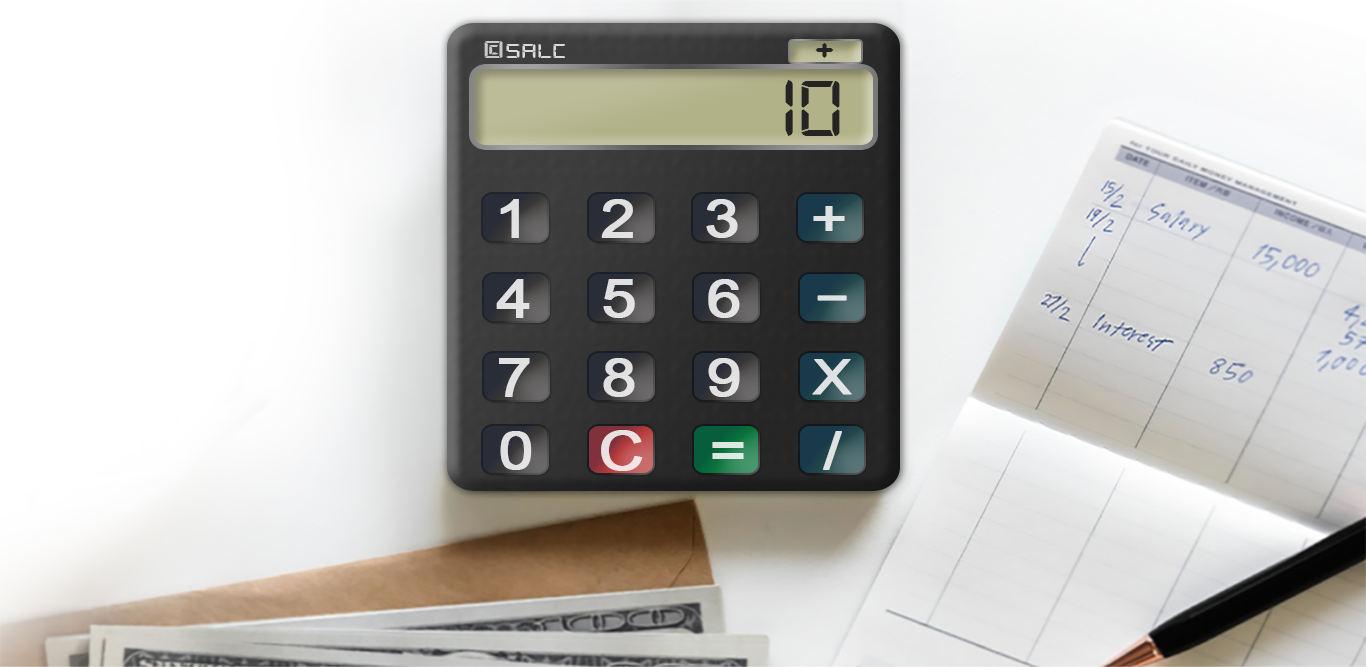
<style>
.page{position:relative;width:1366px;height:667px}
.page>*{position:absolute;margin:0}
.t1{font:21px "Digital-7";color:#dcd9d9;scale:1.6 1}
.t2{font:25.2px "Digital-7";color:#c9c8c8;scale:1.6 1}
.t3{font:48.1px "Digital-7";color:#242424;scale:1.2 1}
.t4{font:84.8px "Digital-7";color:#242424;scale:1.17 1}
.t5{font:52.5px "ArialMT";color:#e1e1e1;text-transform:uppercase;font-weight:bold;scale:1.19 1}
.t6{font:52.5px "ArialMT";color:#dfe2e3;text-transform:uppercase;font-weight:bold;scale:1.19 1}
.t7{font:52.5px "ArialMT";color:#e0e0e1;text-transform:uppercase;font-weight:bold;scale:1.19 1}
.t8{font:52.5px "ArialMT";color:#dfe2e3;text-transform:uppercase;font-weight:bold;scale:1.96 1}
.t9{font:49.1px "ArialMT";color:#dfe2e3;text-transform:uppercase;font-weight:bold;scale:1.19 1}
.t10{font:52.5px "ArialMT";color:#eee1e1;text-transform:uppercase;font-weight:bold;scale:1.19 1}
.t11{font:52.5px "ArialMT";color:#dfe3e3;text-transform:uppercase;font-weight:bold;scale:1.19 1}
.t12{font:52.5px "ArialMT";color:#dee8e2;text-transform:uppercase;font-weight:bold;scale:1.19 1}
</style>
<div class="page">
<p class="t1" style="left:484px;top:41px;width:81px;height:17px"><span class="t2">©</span>SalC</p>
<p class="t3" style="left:815px;top:43px;width:19px;height:15px">+</p>
<p class="t4" style="left:785px;top:80px;width:55px;height:56px">10</p>
<p class="t5" style="left:500px;top:199px;width:19px;height:39px">1</p>
<p class="t5" style="left:601px;top:199px;width:32px;height:39px">2</p>
<p class="t5" style="left:706px;top:199px;width:32px;height:39px">3</p>
<p class="t6" style="left:813px;top:206px;width:32px;height:25px">+</p>
<p class="t5" style="left:496px;top:279px;width:34px;height:39px">4</p>
<p class="t7" style="left:603px;top:279px;width:32px;height:39px">5</p>
<p class="t7" style="left:708px;top:279px;width:32px;height:39px">6</p>
<p class="t8" style="left:817px;top:295px;width:30px;height:6px">-</p>
<p class="t5" style="left:499px;top:358px;width:31px;height:39px">7</p>
<p class="t5" style="left:603px;top:358px;width:32px;height:39px">8</p>
<p class="t5" style="left:708px;top:358px;width:32px;height:39px">9</p>
<p class="t9" style="left:812px;top:359px;width:40px;height:36px">X</p>
<p class="t5" style="left:500px;top:431px;width:32px;height:39px">0</p>
<p class="t10" style="left:601px;top:430px;width:42px;height:41px">C</p>
<p class="t11" style="left:823px;top:431px;width:19px;height:39px">/</p>
<p class="t12" style="left:712px;top:442px;width:32px;height:17px">=</p>
</div>
